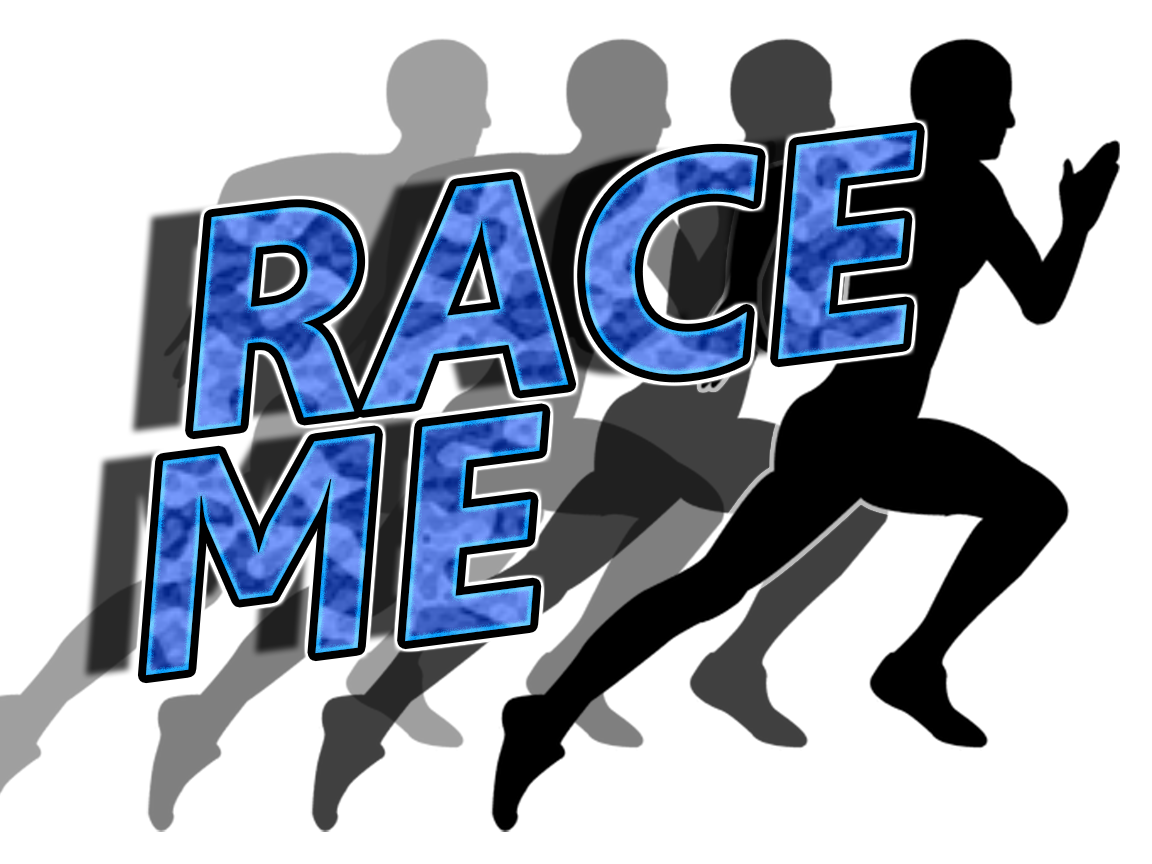
<style>
.page{position:relative;width:1152px;height:864px;background:#ffffff}
.page>*{position:absolute;margin:0}
.t1{font:300px "SegoeUI-BoldItalic"}
</style>
<div class="page">
<p class="t1" style="left:193px;top:130px;width:724px;height:302px;rotate:-7deg">RACE</p>
<p class="t1" style="left:145px;top:411px;width:398px;height:265px;rotate:-7deg">ME</p>
</div>
